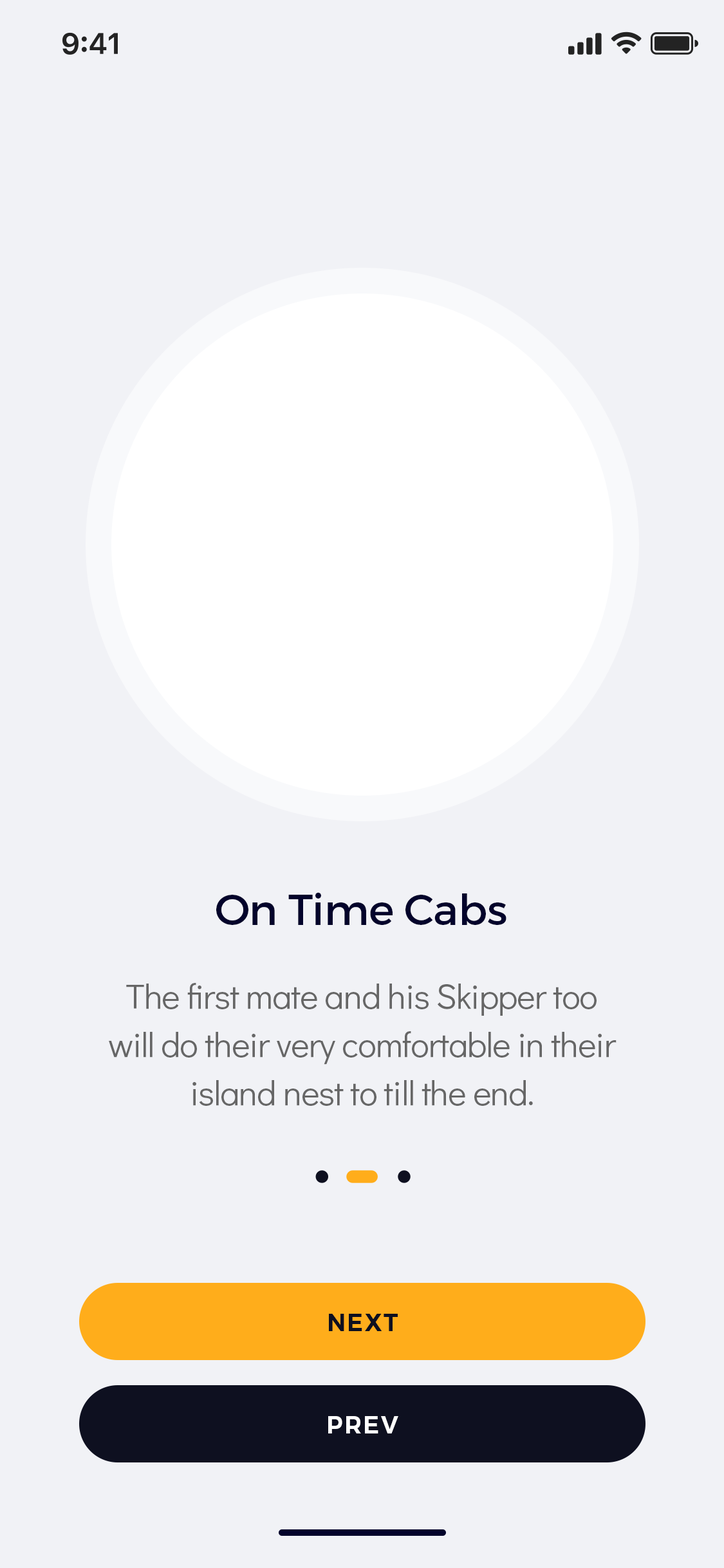
<style>
.page{position:relative;width:724px;height:1568px;background:#f1f2f6}
.page>*{position:absolute;margin:0}
.t1{font:42.9px "Montserrat-Regular";letter-spacing:-0.01em;color:#03032b}
.t2{font:34.9px/48.3px "DidactGothic-Regular";letter-spacing:-0.02em;color:#666666}
.t3{font:24.1px "Montserrat-SemiBold";letter-spacing:0.06em;color:#0e1020}
.t4{font:24.1px "Montserrat-SemiBold";letter-spacing:0.06em;color:#ffffff}
</style>
<div class="page">
<p class="t1" style="left:216px;top:892px;width:291px;height:33px">On Time Cabs</p>
<p class="t2" style="left:109px;top:983px;width:508px;height:123px;text-align:center">The first mate and his Skipper too<br>will do their very comfortable in their island nest to till the end.</p>
<p class="t3" style="left:329px;top:1314px;width:69px;height:17px">NEXT</p>
<p class="t4" style="left:328px;top:1416px;width:70px;height:17px">PREV</p>
</div>
